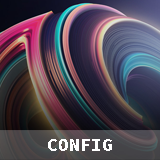
<style>
.page{position:relative;width:160px;height:160px}
.page>*{position:absolute;margin:0}
.t1{font:18px "SourceCodePro-Bold";color:#ffffff}
</style>
<div class="page">
<p class="t1" style="left:48px;top:139px;width:64px;height:12px">CONFIG</p>
</div>
